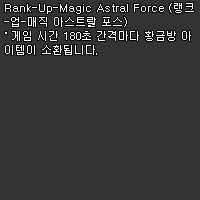
<style>
.page{position:relative;width:200px;height:200px;background:#333333}
.page>*{position:absolute;margin:0}
.t1{font:11px/14px "Dotum";color:#ffffff}
</style>
<div class="page">
<p class="t1" style="left:4px;top:3px;width:190px;height:52px">Rank-Up-Magic Astral Force (랭크<br>-업-매직 아스트랄 포스)<br>˚ 게임 시간 180초 간격마다 황금방 아<br>이템이 소환됩니다.</p>
</div>
